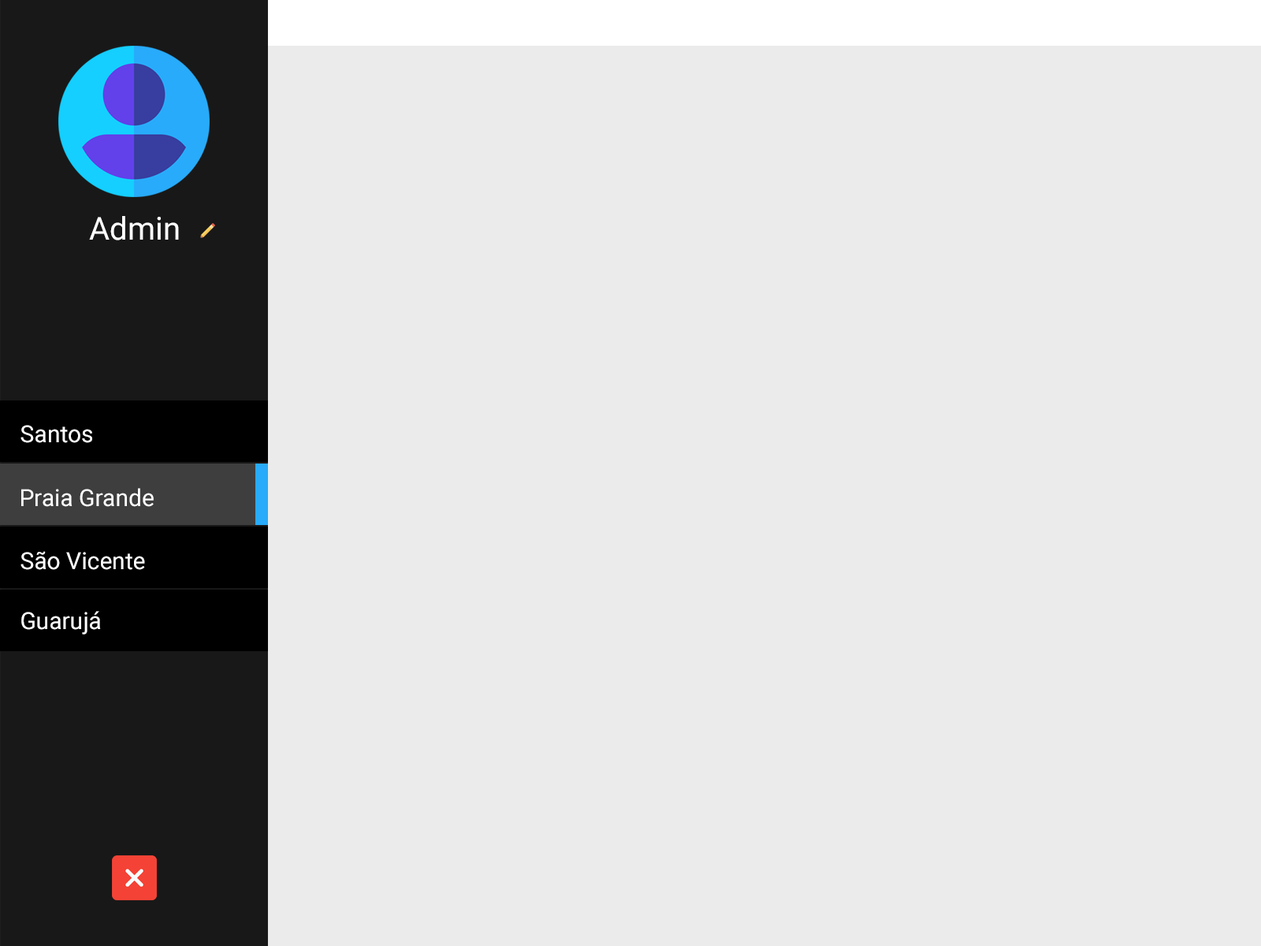
<style>
.page{position:relative;width:1261px;height:946px;background:#ebebeb}
.page>*{position:absolute;margin:0}
.t1{font:31.5px "Roboto-Regular";color:#ffffff}
.t2{font:23.6px "Roboto-Regular";color:#ffffff}
</style>
<div class="page">
<p class="t1" style="left:89px;top:216px;width:90px;height:24px">Admin</p>
<p class="t2" style="left:20px;top:425px;width:72px;height:18px">Santos</p>
<p class="t2" style="left:21px;top:488px;width:133px;height:19px">Praia Grande</p>
<p class="t2" style="left:20px;top:551px;width:125px;height:19px">São Vicente</p>
<p class="t2" style="left:21px;top:611px;width:80px;height:23px">Guarujá</p>
</div>
